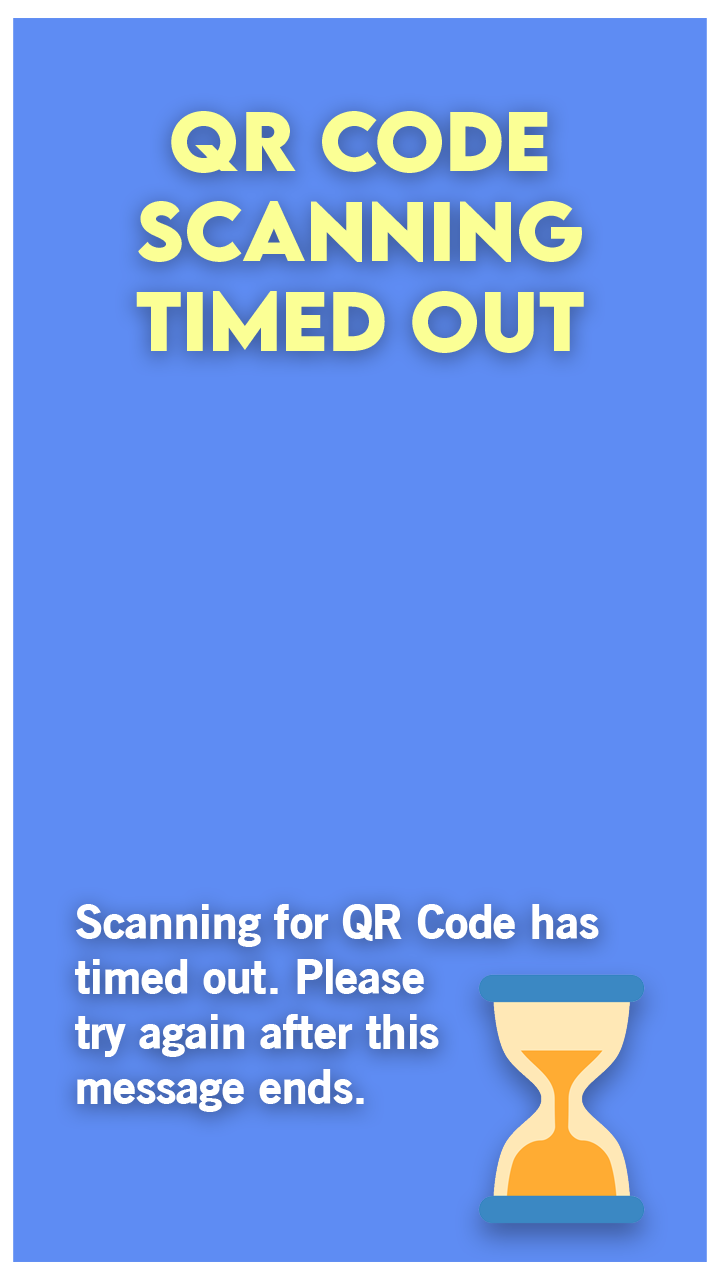
<style>
.page{position:relative;width:720px;height:1280px;background:#5e8cf3}
.page>*{position:absolute;margin:0}
.t1{font:75px "LEMONMILK-Bold";color:#fbff95}
.t2{font:45.8px "OldSansBlack";color:#ffffff}
</style>
<div class="page">
<p class="t1" style="left:136px;top:111px;width:448px;height:242px;text-align:center">qR CODE<br>Scanning timed out</p>
<p class="t2" style="left:75px;top:904px;width:524px;height:208px">Scanning for QR Code has timed out. Please<br>try again after this<br>message ends.</p>
</div>
